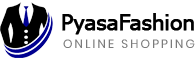
<style>
.page{position:relative;width:195px;height:59px;background:#ffffff}
.page>*{position:absolute;margin:0}
.t1{font:21.4px "Tahoma";color:#000000;font-weight:bold}
</style>
<div class="page">
<p class="t1" style="left:62px;top:13px;width:132px;height:22px">PyasaFashion</p>
</div>
